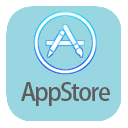
<style>
.page{position:relative;width:128px;height:128px;background:#98d6e1}
.page>*{position:absolute;margin:0}
.t1{font:24px "AdobeHeitiStd-Regular";letter-spacing:-0.07em;color:#5d5d5c}
</style>
<div class="page">
<p class="t1" style="left:21px;top:82px;width:89px;height:24px">AppStore</p>
</div>
